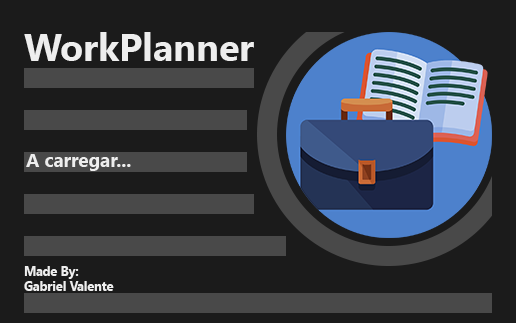
<style>
.page{position:relative;width:516px;height:323px;background:#1b1b1b}
.page>*{position:absolute;margin:0}
.t1{font:37.5px "SegoeUI-Bold";color:#eeeeee}
.t2{font:18.8px "SegoeUI-Bold";color:#eeeeee}
.t3{font:12.5px "SegoeUI-Bold";color:#eeeeee}
</style>
<div class="page">
<p class="t1" style="left:24px;top:32px;width:230px;height:29px">WorkPlanner</p>
<p class="t2" style="left:26px;top:154px;width:105px;height:17px">A carregar...</p>
<p class="t3" style="left:24px;top:266px;width:90px;height:25px">Made By:<br>Gabriel Valente</p>
</div>
